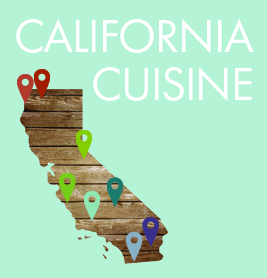
<style>
.page{position:relative;width:267px;height:278px;background:#b5f3d7}
.page>*{position:absolute;margin:0}
.t1{font:48px/48px "FuturaPT-Book";letter-spacing:-0.025em;color:#ffffff;text-transform:uppercase}
</style>
<div class="page">
<p class="t1" style="left:16px;top:18px;width:238px;height:84px;text-align:right">california<br>cuisine</p>
</div>
